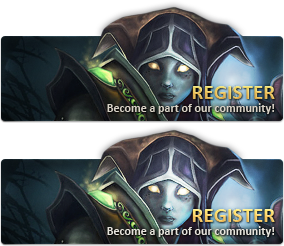
<style>
.page{position:relative;width:284px;height:246px}
.page>*{position:absolute;margin:0}
.t1{font:21px "Calibri-Bold";text-transform:uppercase}
.t2{font:12px "Calibri-Bold";color:#d8d2c6}
.t3{font:12px "Calibri-Bold";color:#e7e4dc}
</style>
<div class="page">
<p class="t1" style="left:192px;top:86px;width:83px;height:13px">Register</p>
<p class="t2" style="left:107px;top:103px;width:168px;height:11px">Become a part of our community!</p>
<p class="t1" style="left:192px;top:209px;width:83px;height:13px">Register</p>
<p class="t3" style="left:107px;top:226px;width:168px;height:11px">Become a part of our community!</p>
</div>
